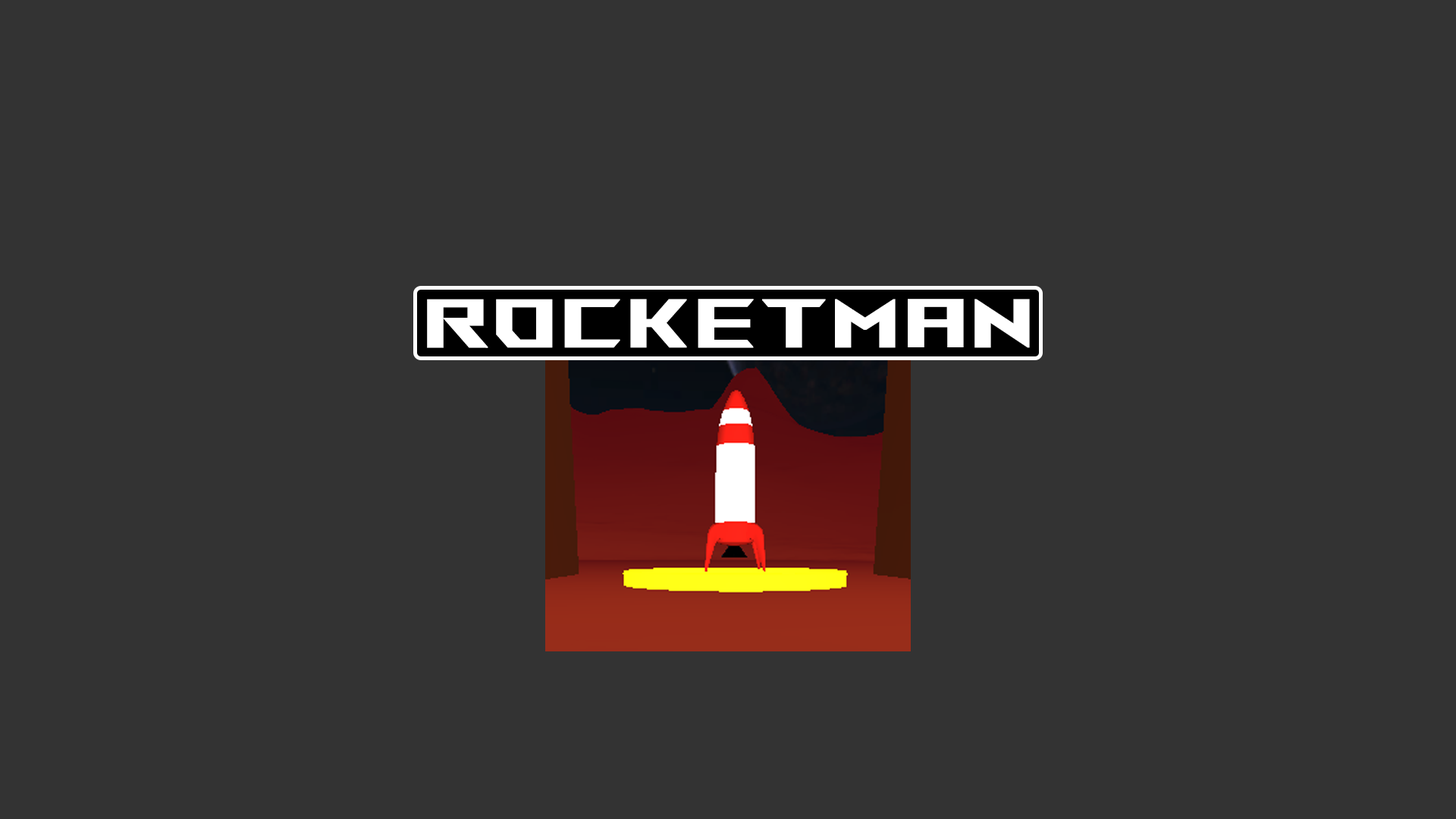
<style>
.page{position:relative;width:1456px;height:819px;background:#333333}
.page>*{position:absolute;margin:0}
.t1{font:67.7px "ROGFonts-Regular";letter-spacing:0.1em;color:#ffffff;font-weight:bold}
</style>
<div class="page">
<p class="t1" style="left:427px;top:299px;width:603px;height:49px">RocketMan</p>
</div>
